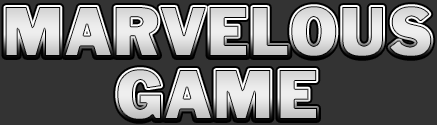
<style>
.page{position:relative;width:437px;height:125px;background:#333333}
.page>*{position:absolute;margin:0}
.t1{font:72px "FranklinGotT-Regu";color:#dcdcdc;font-weight:bold}
</style>
<div class="page">
<p class="t1" style="left:5px;top:6px;width:427px;height:51px">MARVELOUS</p>
<p class="t1" style="left:117px;top:69px;width:200px;height:51px">GAME</p>
</div>
